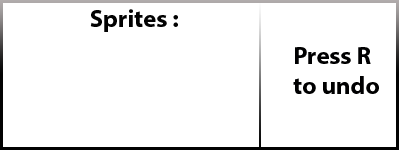
<style>
.page{position:relative;width:399px;height:150px;background:#ffffff}
.page>*{position:absolute;margin:0}
.t1{font:25px "MyriadPro-Bold";color:#020202}
.t2{font:25px "MyriadPro-Bold";color:#000101}
</style>
<div class="page">
<p class="t1" style="left:90px;top:9px;width:88px;height:23px">Sprites :</p>
<p class="t2" style="left:293px;top:47px;width:86px;height:47px">Press R<br>to undo</p>
</div>
